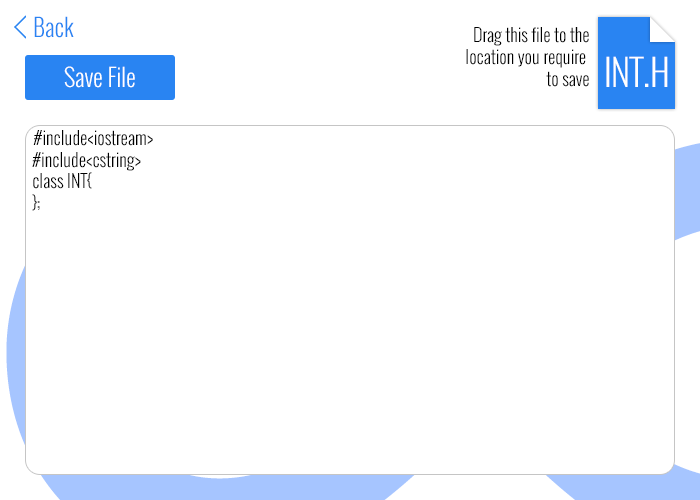
<style>
.page{position:relative;width:700px;height:500px;background:#ffffff}
.page>*{position:absolute;margin:0}
.t1{font:24px "Oswald-Light";color:#2984f2}
.t2{font:18px "Oswald-Light";color:#000000}
.t3{font:36px "Oswald-Light";color:#ffffff}
.t4{font:24px "Oswald-Light";color:#ffffff}
</style>
<div class="page">
<p class="t1" style="left:34px;top:16px;width:40px;height:22px">Back</p>
<p class="t2" style="left:466px;top:27px;width:123px;height:60px;text-align:right">Drag this file to the<br>location you require <br>to save</p>
<p class="t3" style="left:606px;top:56px;width:62px;height:31px">INT.H</p>
<p class="t4" style="left:64px;top:66px;width:71px;height:22px">Save File</p>
<p class="t2" style="left:32px;top:130px;width:121px;height:81px">#include&lt;iostream&gt;<br>  #include&lt;cstring&gt;<br>  class INT{<br>  };</p>
</div>
